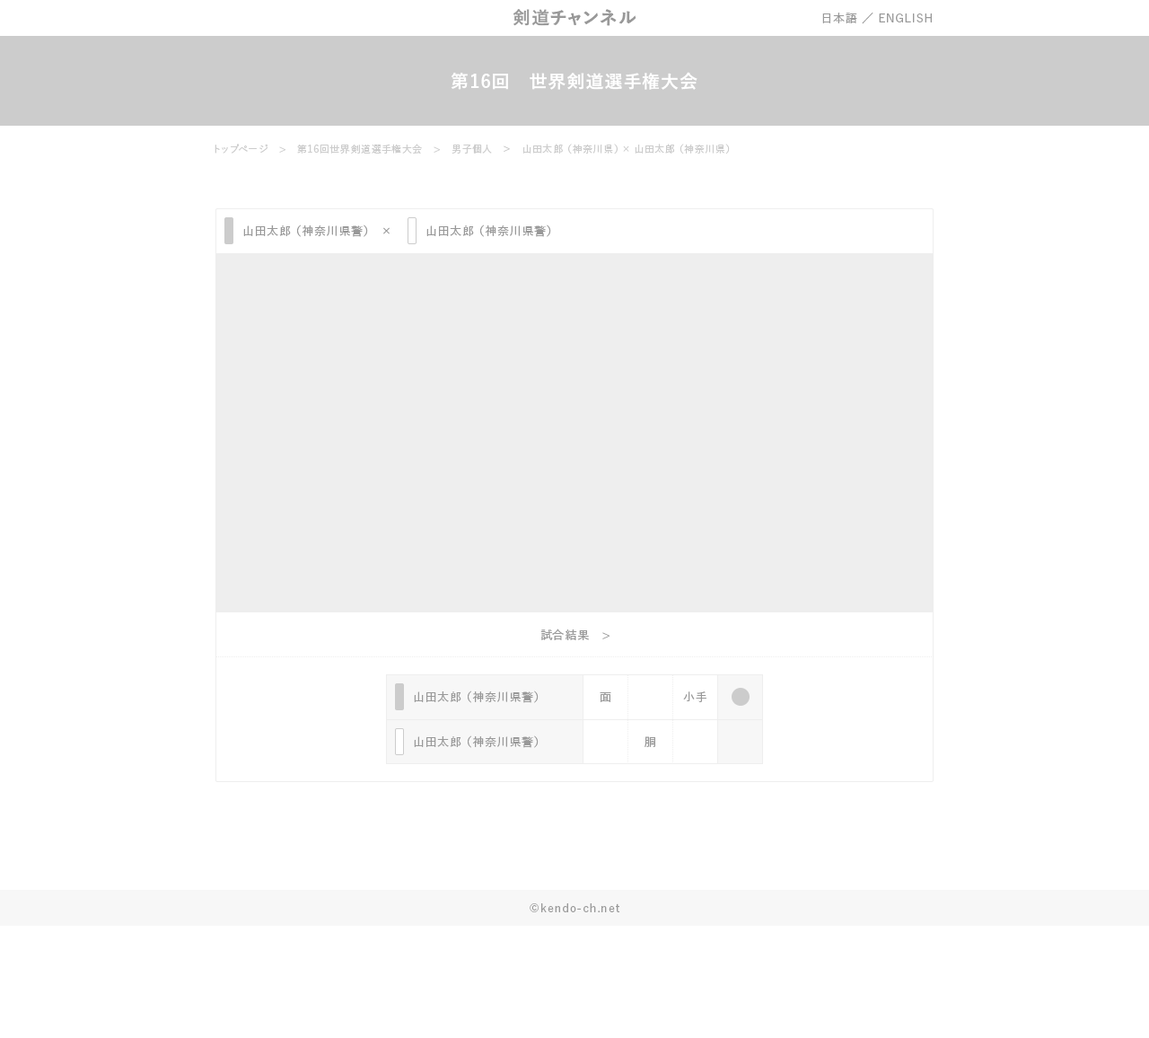
<style>
.page{position:relative;width:1149px;height:1038px;background:#ffffff}
.page>*{position:absolute;margin:0}
.t1{font:18px "YuGo-Bold";letter-spacing:0.05em;color:#999999}
.t2{font:11.7px "YuGo-Medium";letter-spacing:0.05em;color:#999999}
.t3{font:18px "YuGo-Bold";letter-spacing:0.05em;color:#ffffff}
.t4{font:9.9px "YuGo-Medium";letter-spacing:0.05em;color:#cccccc}
.t5{font:11.7px/44.9px "YuGo-Medium";letter-spacing:0.05em;color:#999999}
</style>
<div class="page">
<p class="t1" style="left:513px;top:9px;width:123px;height:17px">剣道チャンネル</p>
<p class="t2" style="left:822px;top:13px;width:110px;height:11px">日本語 ／ ENGLISH</p>
<p class="t3" style="left:451px;top:72px;width:247px;height:18px">第16回　世界剣道選手権大会</p>
<p class="t4" style="left:215px;top:144px;width:515px;height:10px">トップページ　&gt;　第16回世界剣道選手権大会　&gt;　男子個人　＞　山田太郎 （神奈川県） × 山田太郎 （神奈川県）</p>
<p class="t2" style="left:243px;top:224px;width:147px;height:13px">山田太郎 （神奈川県警）　×</p>
<p class="t2" style="left:426px;top:224px;width:125px;height:13px">山田太郎 （神奈川県警）</p>
<p class="t2" style="left:540px;top:628px;width:70px;height:12px">試合結果　&gt;</p>
<p class="t5" style="left:414px;top:690px;width:125px;height:58px">山田太郎 （神奈川県警）<br>山田太郎 （神奈川県警）</p>
<p class="t2" style="left:600px;top:692px;width:11px;height:10px">面</p>
<p class="t2" style="left:683px;top:691px;width:23px;height:11px">小手</p>
<p class="t2" style="left:645px;top:736px;width:10px;height:11px">胴</p>
<p class="t2" style="left:530px;top:903px;width:90px;height:9px">©kendo-ch.net</p>
</div>
